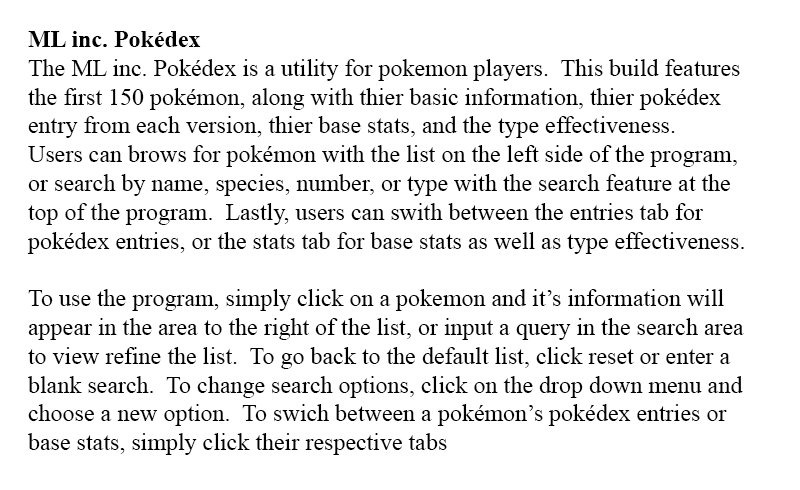
<style>
.page{position:relative;width:800px;height:490px;background:#ffffff}
.page>*{position:absolute;margin:0}
.t1{font:24px "TimesNewRomanPSMT";color:#000000}
.t2{font:24px "TimesNewRomanPS-BoldMT";color:#000000}
</style>
<div class="page">
<p class="t1" style="left:27px;top:31px;width:717px;height:424px"><span class="t2">ML inc. Pokédex<br></span>The ML inc. Pokédex is a utility for pokemon players.  This build features<br>the first 150 pokémon, along with thier basic information, thier pokédex<br>entry from each version, thier base stats, and the type effectiveness.  <br>Users can brows for pokémon with the list on the left side of the program,<br>or search by name, species, number, or type with the search feature at the<br>top of the program.  Lastly, users can swith between the entries tab for <br>pokédex entries, or the stats tab for base stats as well as type effectiveness.<br><br>To use the program, simply click on a pokemon and it’s information will<br>appear in the area to the right of the list, or input a query in the search area<br>to view refine the list.  To go back to the default list, click reset or enter a <br>blank search.  To change search options, click on the drop down menu and<br>choose a new option.  To swich between a pokémon’s pokédex entries or <br>base stats, simply click their respective tabs</p>
</div>
